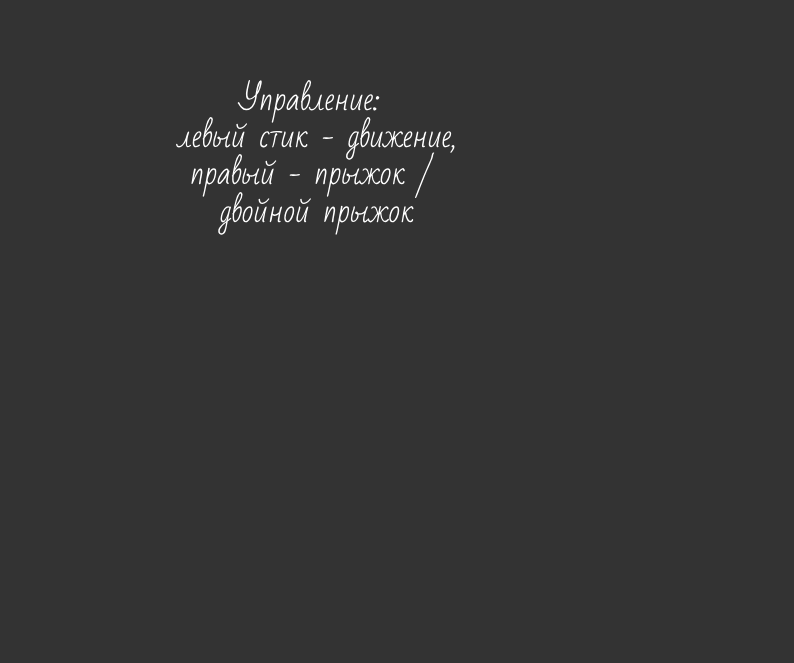
<style>
.page{position:relative;width:794px;height:663px;background:#333333}
.page>*{position:absolute;margin:0}
.t1{font:31px "BadScript-Regular";color:#ffffff}
</style>
<div class="page">
<p class="t1" style="left:176px;top:79px;width:279px;height:156px;text-align:center">Управление: <br>левый стик - движение,<br>правый - прыжок / <br>двойной прыжок</p>
</div>
